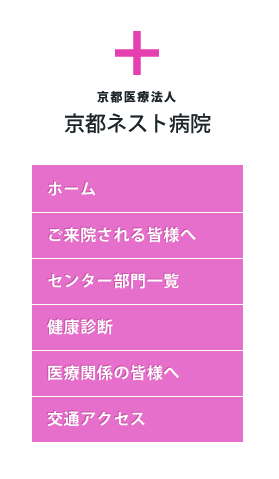
<style>
.page{position:relative;width:279px;height:479px;background:#ffffff}
.page>*{position:absolute;margin:0}
.t1{font:63.1px "KozGoPr6N-Heavy";color:#e53fb2}
.t2{font:12px "KozGoPr6N-Heavy";letter-spacing:0.12em;color:#1d2528}
.t3{font:21px "KozGoPr6N-Medium";color:#1d2528}
.t4{font:16px/46px "KozGoPr6N-Bold";letter-spacing:0.04em;color:#ffffff}
</style>
<div class="page">
<p class="t1" style="left:115px;top:31px;width:44px;height:44px">＋</p>
<p class="t2" style="left:97px;top:91px;width:79px;height:12px">京都医療法人</p>
<p class="t3" style="left:64px;top:113px;width:147px;height:21px">京都ネスト病院</p>
<p class="t4" style="left:47px;top:181px;width:149px;height:246px">ホーム<br>ご来院される皆様へ<br>センター部門一覧<br>健康診断<br>医療関係の皆様へ<br>交通アクセス</p>
</div>
